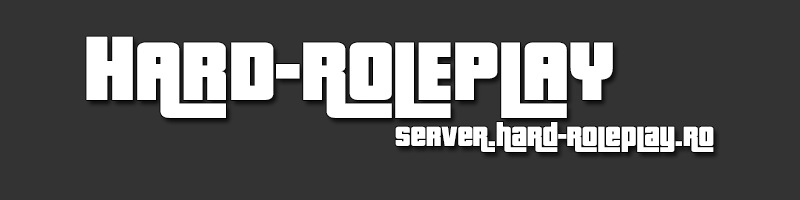
<style>
.page{position:relative;width:800px;height:200px;background:#333333}
.page>*{position:absolute;margin:0}
.t1{font:90px "PricedownBl-Regular";color:#ffffff}
.t2{font:99px "PricedownBl-Regular";color:#ffffff}
.t3{font:30px "PricedownBl-Regular";color:#ffffff}
</style>
<div class="page">
<p class="t1" style="left:86px;top:36px;width:527px;height:82px"><span class="t2">H</span>ARD-ROLEPLAY</p>
<p class="t3" style="left:395px;top:122px;width:319px;height:30px">server.hard-roleplay.ro</p>
</div>
